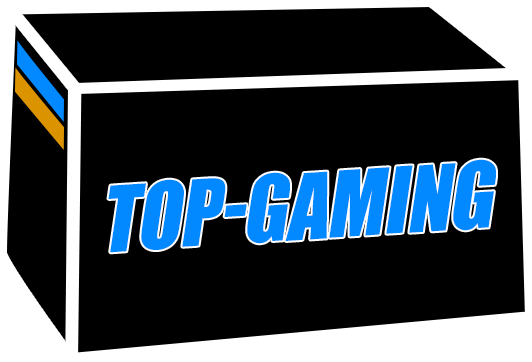
<style>
.page{position:relative;width:532px;height:362px;background:#000000}
.page>*{position:absolute;margin:0}
.t1{font:84.2px "Impact";color:#028aff;text-transform:uppercase;font-style:italic;scale:0.94 1}
</style>
<div class="page">
<p class="t1" style="left:108px;top:159px;width:388px;height:94px;rotate:-4deg">TOP-GAMING</p>
</div>
